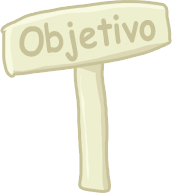
<style>
.page{position:relative;width:172px;height:193px;background:#ffffff}
.page>*{position:absolute;margin:0}
.t1{font:39.3px "ComicSansMS-Bold";color:#c8c299;scale:0.86 1}
</style>
<div class="page">
<p class="t1" style="left:19px;top:14px;width:137px;height:48px;rotate:-8deg">Objetivo</p>
</div>
